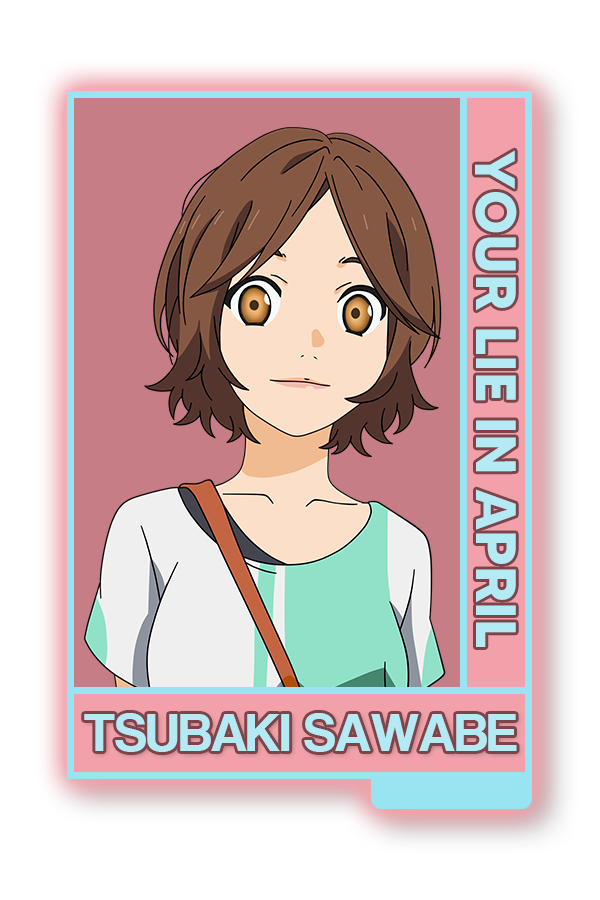
<style>
.page{position:relative;width:600px;height:900px;background:#ffffff}
.page>*{position:absolute;margin:0}
.t1{font:56.7px "MADETOMMY-Bold";color:#b3eaf4}
.t2{font:55.7px "CoolveticaRg-Regular";color:#b3eaf4}
</style>
<div class="page">
<p class="t1" style="left:475px;top:150px;width:42px;height:497px;rotate:90deg">YOUR LIE IN APRIL</p>
<p class="t2" style="left:84px;top:713px;width:433px;height:39px">TSUBAKI SAWABE</p>
</div>
